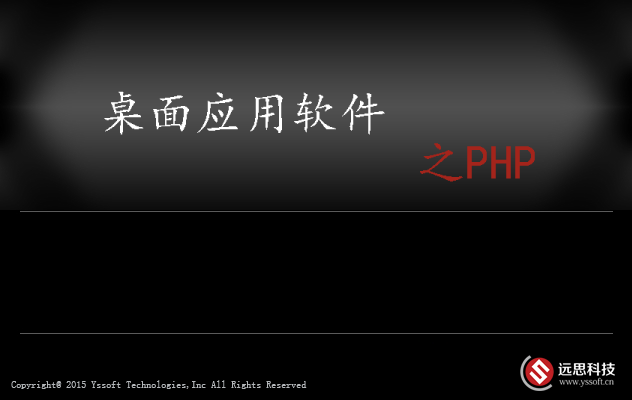
<style>
.page{position:relative;width:632px;height:400px;background:#000000}
.page>*{position:absolute;margin:0}
.t1{font:48px "¿¬Ìå";color:#ffffff}
.t2{font:48px "¿¬Ìå";color:#a4241b}
.t3{font:10px "LiSu";color:#b4b7ba}
</style>
<div class="page">
<p class="t1" style="left:104px;top:91px;width:281px;height:44px">桌面应用软件</p>
<p class="t2" style="left:420px;top:143px;width:115px;height:39px">之PHP</p>
<p class="t3" style="left:11px;top:380px;width:296px;height:9px">Copyright@ 2015 Yssoft Technologies,Inc All Rights Reserved</p>
</div>
